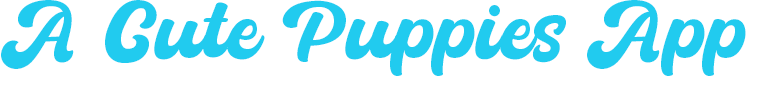
<style>
.page{position:relative;width:757px;height:89px;background:#ffffff}
.page>*{position:absolute;margin:0}
.t1{font:80px "BatuphatScript-Extrude"}
.t2{font:80px "BatuphatScript-Regular";color:#21cbef}
</style>
<div class="page">
<p class="t1" style="left:0px;top:0px;width:757px;height:89px">A Cute Puppies App</p>
<p class="t2" style="left:1px;top:0px;width:745px;height:76px">A Cute Puppies App</p>
</div>
